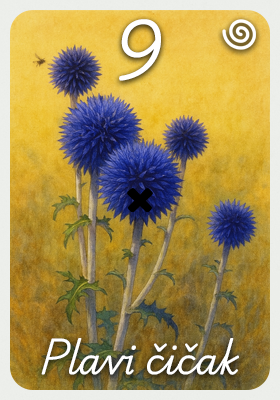
<style>
.page{position:relative;width:280px;height:400px}
.page>*{position:absolute;margin:0}
.t1{font:60px "PlaywriteAUSA-Regular";color:#ffffff}
.t2{font:36px "PlaywriteAUSA-Regular";color:#ffffff}
</style>
<div class="page">
<p class="t1" style="left:119px;top:19px;width:42px;height:62px">9</p>
<p class="t2" style="left:41px;top:338px;width:198px;height:37px">Plavi čičak</p>
</div>
